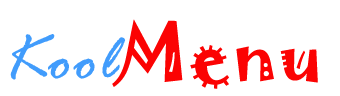
<style>
.page{position:relative;width:340px;height:96px;background:#ffffff}
.page>*{position:absolute;margin:0}
.t1{font:66px "RageItalic";letter-spacing:0.025em;color:#419cfc}
.t2{font:72px "Jokerman-Regular";letter-spacing:0.025em;color:#fb0303}
</style>
<div class="page">
<p class="t1" style="left:10px;top:19px;width:308px;height:70px">Kool<span class="t2">Menu</span></p>
</div>
